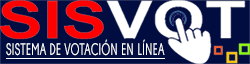
<style>
.page{position:relative;width:250px;height:64px;background:#010c40}
.page>*{position:absolute;margin:0}
.t1{font:12.5px "DiamondsRegular";color:#ffffff;scale:0.65 1}
</style>
<div class="page">
<p class="t1" style="left:6px;top:39px;width:159px;height:17px">SISTEMA DE VOTACIÓN EN LÍNEA</p>
</div>
